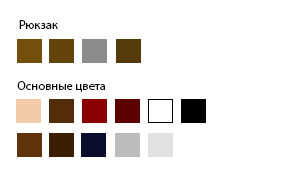
<style>
.page{position:relative;width:300px;height:180px;background:#ffffff}
.page>*{position:absolute;margin:0}
.t1{font:12.5px "MyriadPro-Regular";letter-spacing:0.001em;color:#000000}
</style>
<div class="page">
<p class="t1" style="left:19px;top:20px;width:39px;height:9px">Рюкзак</p>
<p class="t1" style="left:17px;top:81px;width:88px;height:11px">Основные цвета</p>
</div>
